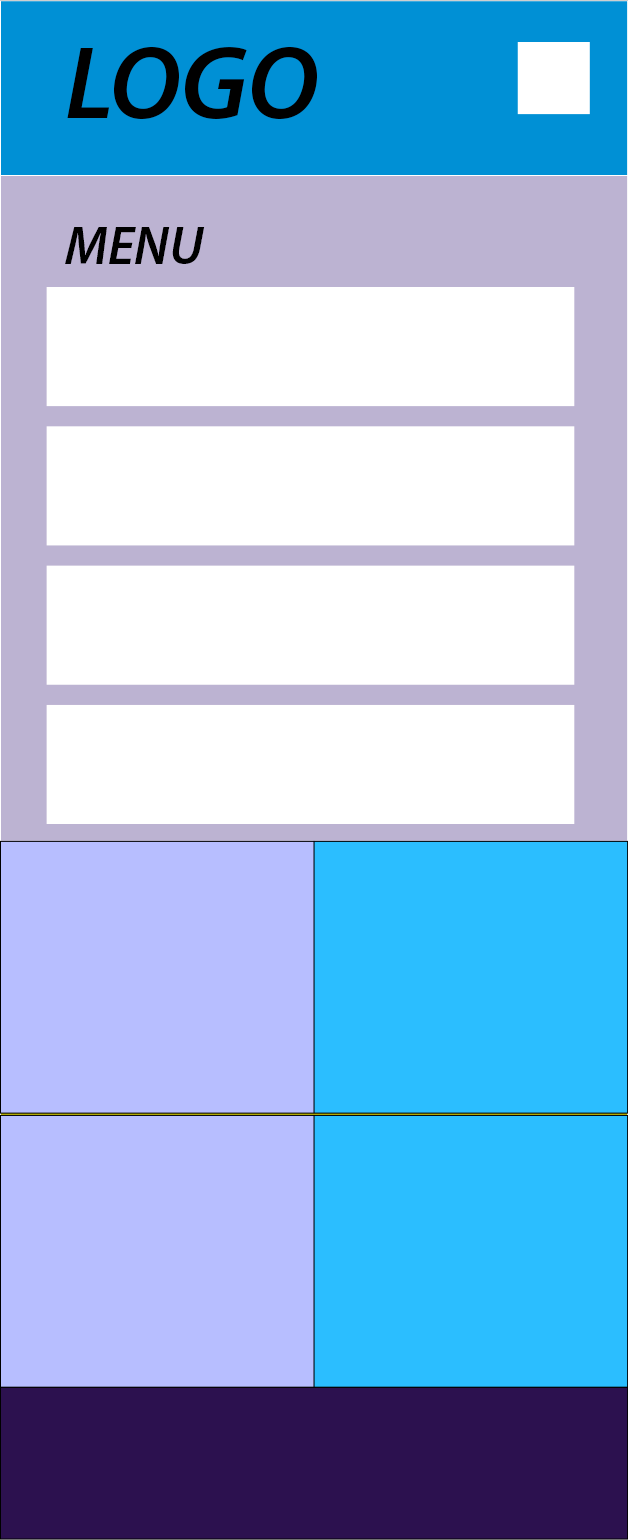
<style>
.page{position:relative;width:628px;height:1540px;background:#ffffff}
.page>*{position:absolute;margin:0}
.t1{font:103.7px "MyriadPro-SemiboldIt";color:#000000;text-transform:uppercase}
.t2{font:53.7px "MyriadPro-SemiboldIt";color:#000000;text-transform:uppercase}
</style>
<div class="page">
<p class="t1" style="left:67px;top:46px;width:250px;height:74px">logo</p>
<p class="t2" style="left:65px;top:227px;width:140px;height:37px">menu</p>
</div>
